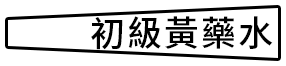
<style>
.page{position:relative;width:286px;height:66px;background:#ffffff}
.page>*{position:absolute;margin:0}
.t1{font:35px "NotoSansCJKtc-Medium";letter-spacing:0.06em;color:#000000}
</style>
<div class="page">
<p class="t1" style="left:91px;top:16px;width:182px;height:34px">初級黃藥水</p>
</div>
